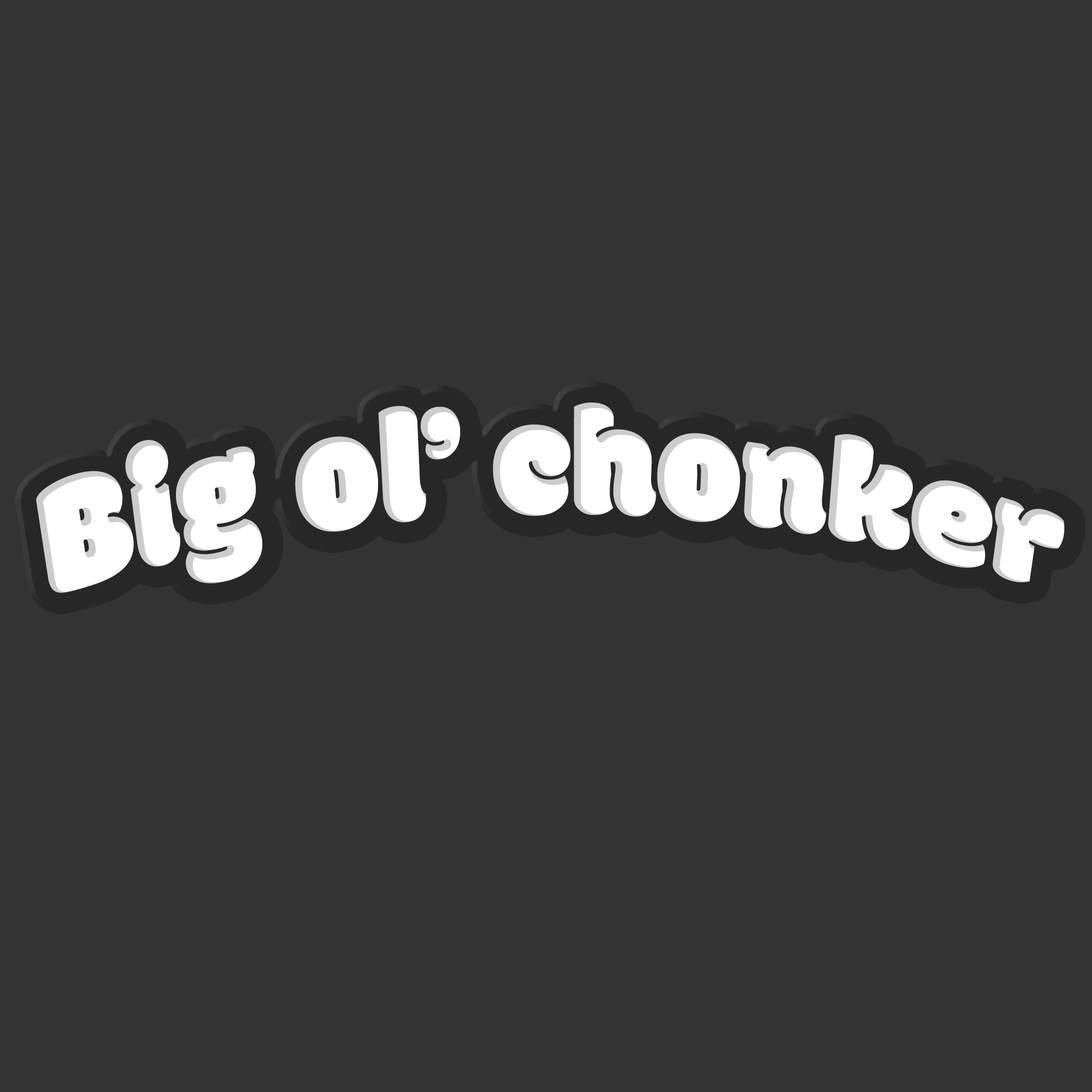
<style>
.page{position:relative;width:1092px;height:1092px;background:#333333}
.page>*{position:absolute;margin:0}
.t1{font:163.2px "Modak";color:#ffffff;scale:0.87 1}
</style>
<div class="page">
<p class="t1" style="left:36px;top:402px;width:1029px;height:191px">Big ol’ chonker</p>
</div>
